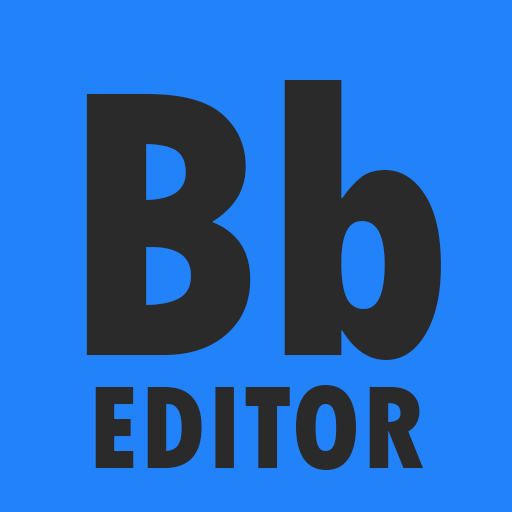
<style>
.page{position:relative;width:512px;height:512px;background:#2182f9}
.page>*{position:absolute;margin:0}
.t1{font:400px "TwCenMT-CondensedExtraBold";color:#2a2a2a}
.t2{font:125px "TwCenMT-CondensedExtraBold";color:#2a2a2a}
</style>
<div class="page">
<p class="t1" style="left:86px;top:80px;width:355px;height:280px">Bb</p>
<p class="t2" style="left:95px;top:385px;width:328px;height:85px">EDITOR</p>
</div>
